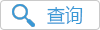
<style>
.page{position:relative;width:100px;height:30px;background:#ffffff}
.page>*{position:absolute;margin:0}
.t1{font:18px "MicrosoftYaHei";color:#3998d6}
</style>
<div class="page">
<p class="t1" style="left:47px;top:6px;width:36px;height:18px">查询</p>
</div>
